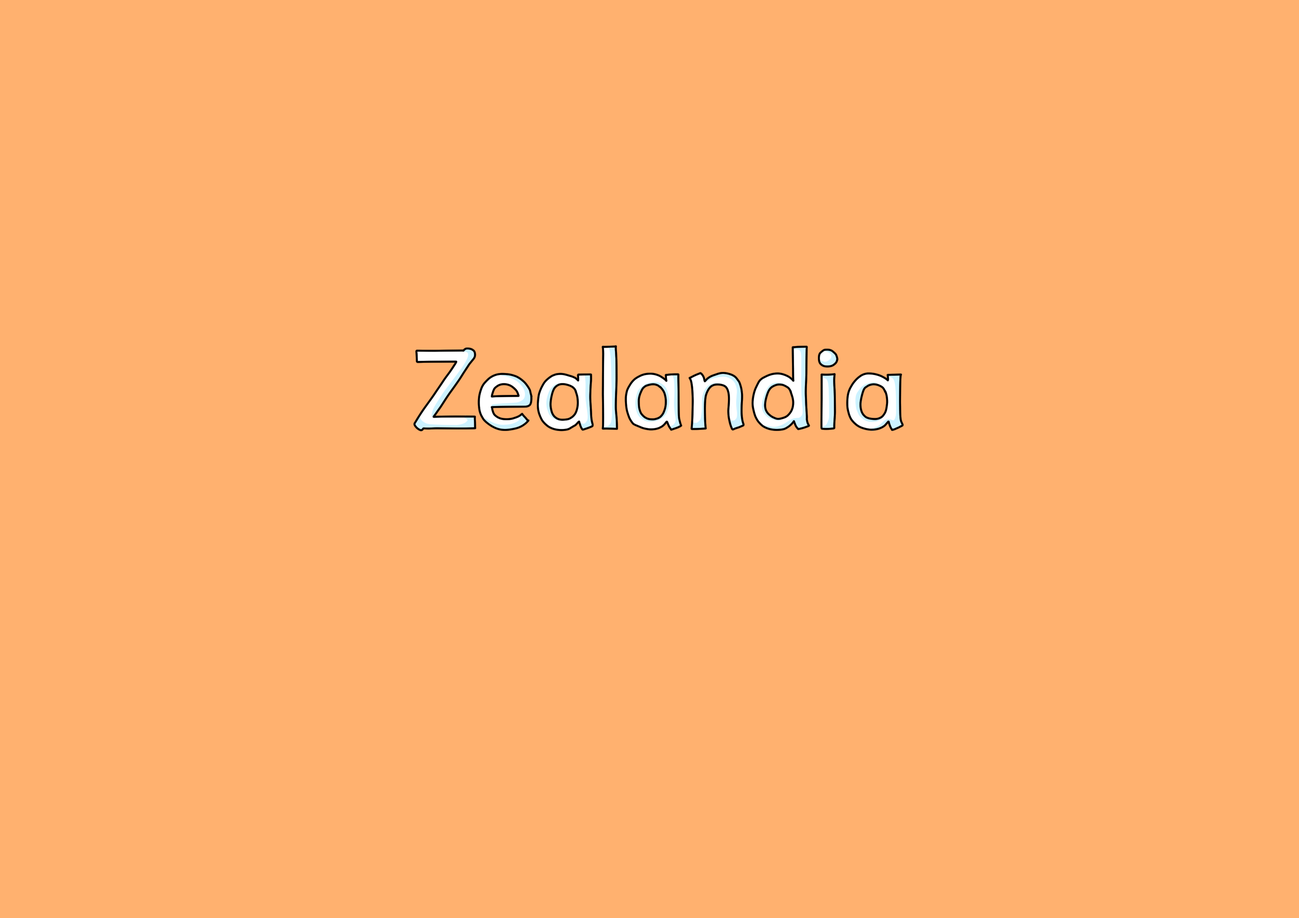
<style>
.page{position:relative;width:1299px;height:918px;background:#ffb16f}
.page>*{position:absolute;margin:0}
.t1{font:111.1px "Niramit-SemiBold"}
</style>
<div class="page">
<p class="t1" style="left:414px;top:347px;width:489px;height:83px">Zealandia</p>
</div>
